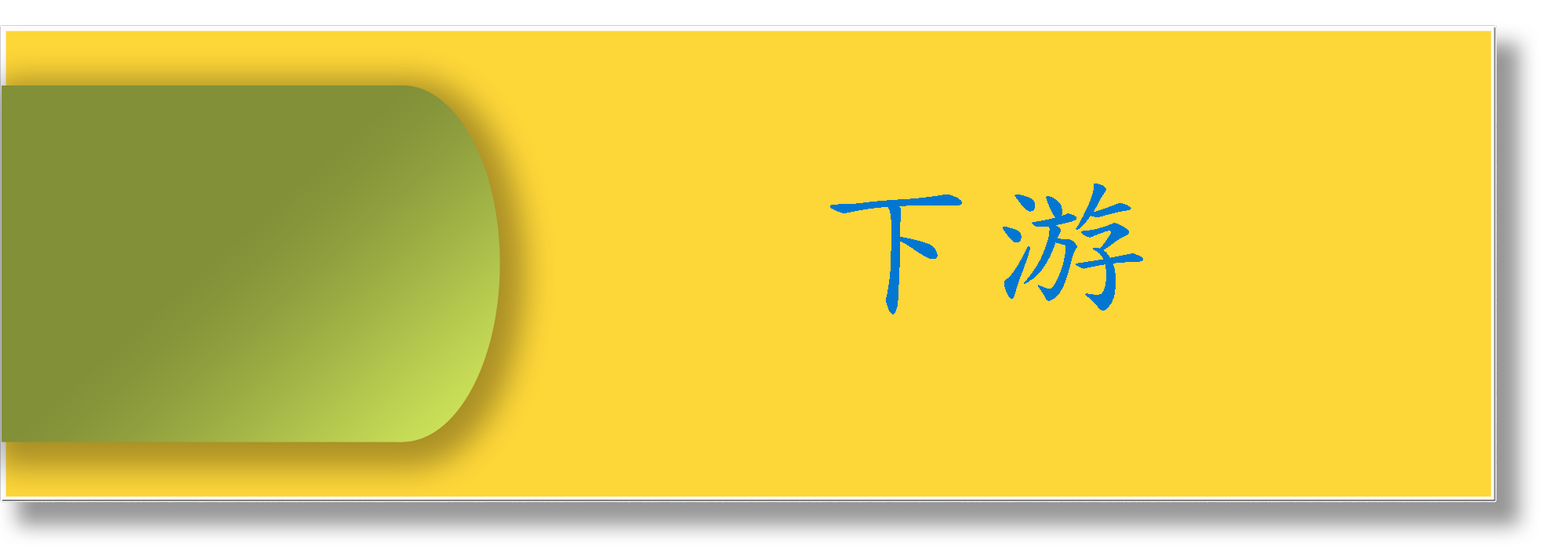
<style>
.page{position:relative;width:1568px;height:549px;background:#fdd638}
.page>*{position:absolute;margin:0}
.t1{font:156.8px "DFKaiShu-SB-Estd-BF";letter-spacing:0.08em;color:#0277d2}
</style>
<div class="page">
<p class="t1" style="left:830px;top:183px;width:313px;height:131px">下游</p>
</div>
